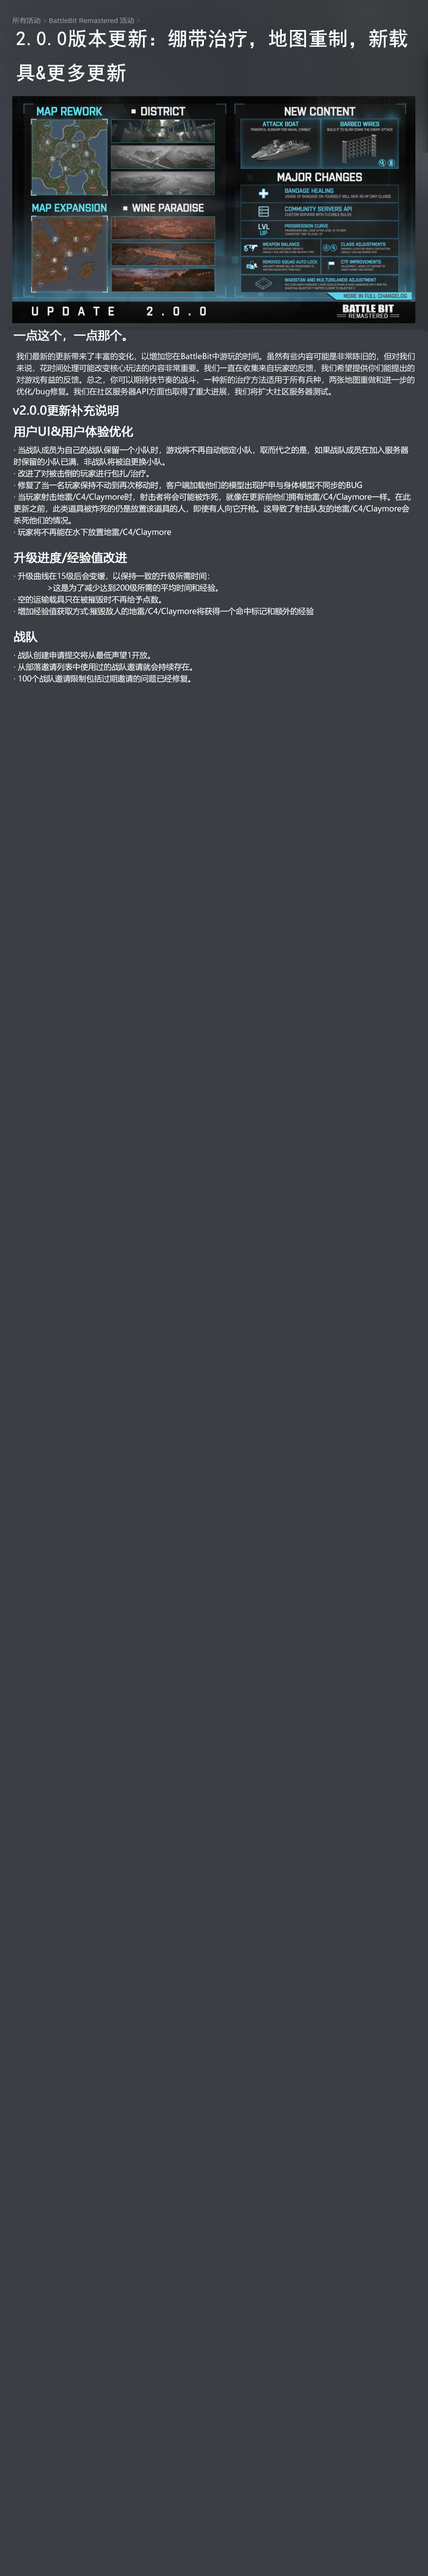
<style>
.page{position:relative;width:428px;height:2576px;background:#3b3e45}
.page>*{position:absolute;margin:0}
.t1{font:7.8px/11.7px "MicrosoftYaHei";color:#ffffff}
.t2{font:11.7px "MicrosoftYaHei";color:#ffffff;font-weight:bold}
</style>
<div class="page">
<p class="t1" style="left:14px;top:425px;width:397px;height:258px"><span class="t2">用户UI&amp;用户体验优化<br></span>· 当战队成员为自己的战队保留一个小队时，游戏将不再自动锁定小队，取而代之的是，如果战队成员在加入服务器时保留的小队已满，非战队将被迫更换小队。<br>· 改进了对被击倒的玩家进行包扎/治疗。<br>· 修复了当一名玩家保持不动到再次移动时，客户端加载他们的模型出现护甲与身体模型不同步的BUG<br>· 当玩家射击地雷/C4/Claymore时，射击者将会可能被炸死，就像在更新前他们拥有地雷/C4/Claymore一样。在此更新之前，此类道具被炸死的仍是放置该道具的人，即使有人向它开枪。这导致了射击队友的地雷/C4/Claymore会杀死他们的情况。<br>· 玩家将不再能在水下放置地雷/C4/Claymore<br><br><span class="t2">升级进度/经验值改进<br></span>· 升级曲线在15级后会变缓，以保持一致的升级所需时间：<br>  &gt;这是为了减少达到200级所需的平均时间和经验。<br>· 空的运输载具只在被摧毁时不再给予点数。<br>· 增加经验值获取方式:摧毁敌人的地雷/C4/Claymore将获得一个命中标记和额外的经验<br><br><span class="t2">战队<br></span>· 战队创建申请提交将从最低声望1开放。<br>· 从部落邀请列表中使用过的战队邀请就会持续存在。<br>· 100个战队邀请限制包括过期邀请的问题已经修复。</p>
</div>
